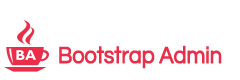
<style>
.page{position:relative;width:240px;height:80px;background:#ffffff}
.page>*{position:absolute;margin:0}
.t1{font:24px "Questrial-Regular";letter-spacing:-0.025em;color:#ea2e49;font-weight:bold;scale:0.9 1}
</style>
<div class="page">
<p class="t1" style="left:59px;top:45px;width:163px;height:24px">Bootstrap Admin</p>
</div>
